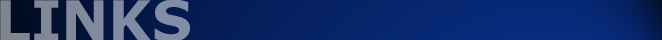
<style>
.page{position:relative;width:662px;height:40px}
.page>*{position:absolute;margin:0}
.t1{font:56px "Verdana-Bold";letter-spacing:-0.005em;color:#818a9d}
</style>
<div class="page">
<p class="t1" style="left:0px;top:0px;width:190px;height:42px">LINKS</p>
</div>
